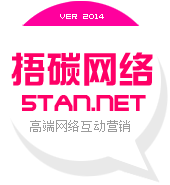
<style>
.page{position:relative;width:170px;height:185px;background:#ffffff}
.page>*{position:absolute;margin:0}
.t1{font:36px "HYk1gj";color:#ff0066}
.t2{font:24px "TerminatorTwo";color:#ff0066}
</style>
<div class="page">
<p class="t1" style="left:11px;top:52px;width:142px;height:34px">捂碳网络</p>
<p class="t2" style="left:22px;top:95px;width:124px;height:16px">5TAN.NET</p>
</div>
